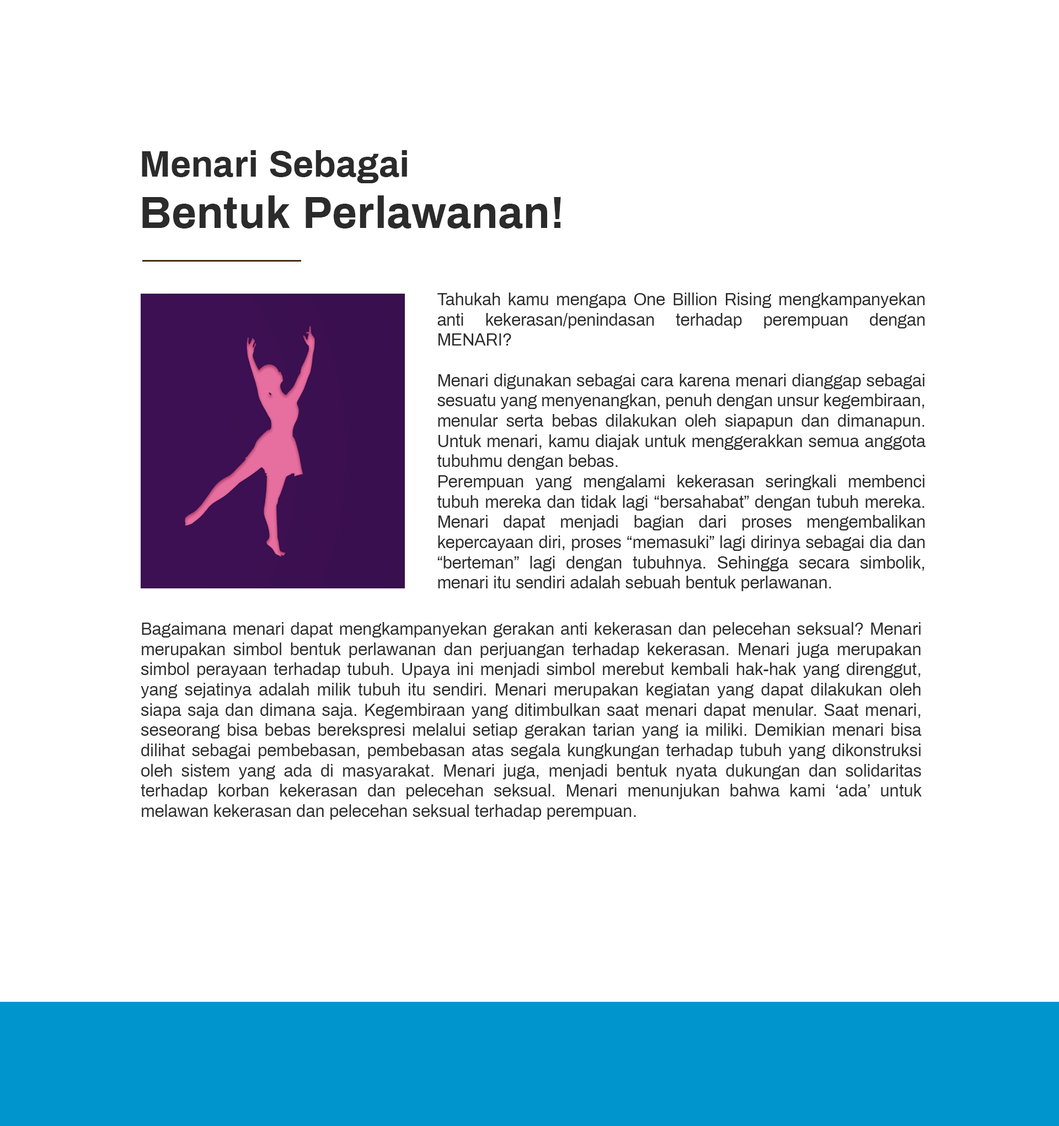
<style>
.page{position:relative;width:1059px;height:1126px;background:#ffffff}
.page>*{position:absolute;margin:0}
.t1{font:36.8px "Archivo-Bold";color:#2b2b2b}
.t2{font:44.5px "Archivo-Bold";color:#2b2b2b}
.t3{font:16.9px "Archivo-Regular";color:#2b2b2b}
.t4{font:16.9px "Archivo-Regular";color:#2d2d2d}
</style>
<div class="page">
<p class="t1" style="left:142px;top:150px;width:265px;height:33px">Menari Sebagai</p>
<p class="t2" style="left:142px;top:195px;width:419px;height:33px">Bentuk Perlawanan!</p>
<p class="t3" style="left:438px;top:292px;width:488px;height:299px;text-align:justify">Tahukah kamu mengapa One Billion Rising mengkampanyekan anti kekerasan/penindasan terhadap perempuan dengan MENARI?<br><br>Menari digunakan sebagai cara karena menari dianggap sebagai sesuatu yang menyenangkan, penuh dengan unsur kegembiraan, menular serta bebas dilakukan oleh siapapun dan dimanapun. Untuk menari, kamu diajak untuk menggerakkan semua anggota tubuhmu dengan bebas.<br>Perempuan yang mengalami kekerasan seringkali membenci tubuh mereka dan tidak lagi “bersahabat” dengan tubuh mereka. Menari dapat menjadi bagian dari proses mengembalikan kepercayaan diri, proses “memasuki” lagi dirinya sebagai dia dan “berteman” lagi dengan tubuhnya. Sehingga secara simbolik, menari itu sendiri adalah sebuah bentuk perlawanan.</p>
<p class="t4" style="left:141px;top:622px;width:781px;height:197px;text-align:justify">Bagaimana menari dapat mengkampanyekan gerakan anti kekerasan dan pelecehan seksual? Menari merupakan simbol bentuk perlawanan dan perjuangan terhadap kekerasan. Menari juga merupakan simbol perayaan terhadap tubuh. Upaya ini menjadi simbol merebut kembali hak-hak yang direnggut, yang sejatinya adalah milik tubuh itu sendiri. Menari merupakan kegiatan yang dapat dilakukan oleh siapa saja dan dimana saja. Kegembiraan yang ditimbulkan saat menari dapat menular. Saat menari, seseorang bisa bebas berekspresi melalui setiap gerakan tarian yang ia miliki. Demikian menari bisa dilihat sebagai pembebasan, pembebasan atas segala kungkungan terhadap tubuh yang dikonstruksi oleh sistem yang ada di masyarakat. Menari juga, menjadi bentuk nyata dukungan dan solidaritas terhadap korban kekerasan dan pelecehan seksual. Menari menunjukan bahwa kami ‘ada’ untuk melawan kekerasan dan pelecehan seksual terhadap perempuan.</p>
</div>
